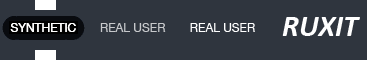
<style>
.page{position:relative;width:367px;height:60px;background:#2f353e}
.page>*{position:absolute;margin:0}
.t1{font:30px "Calibri-BoldItalic";color:#ffffff}
.t2{font:12px "HelveticaNeue";color:#ffffff}
.t3{font:12px "HelveticaNeue";color:#c7c8cb}
</style>
<div class="page">
<p class="t1" style="left:282px;top:17px;width:78px;height:19px">RUXIT</p>
<p class="t2" style="left:10px;top:23px;width:66px;height:9px">SYNTHETIC</p>
<p class="t2" style="left:10px;top:23px;width:66px;height:9px">SYNTHETIC</p>
<p class="t3" style="left:100px;top:23px;width:66px;height:9px">REAL USER</p>
<p class="t2" style="left:190px;top:23px;width:65px;height:9px">REAL USER</p>
</div>
